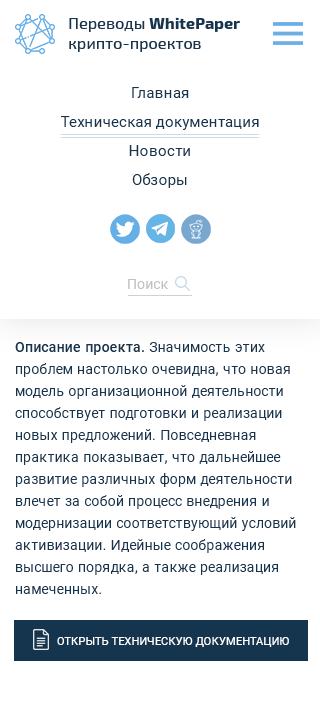
<style>
.page{position:relative;width:320px;height:710px;background:#ffffff}
.page>*{position:absolute;margin:0}
.t1{font:16px/20px "Exo2.0-Regular";letter-spacing:0.01em;color:#16364f}
.t2{font:16px/20px "Exo2.0-Bold";letter-spacing:0.01em;color:#16364f}
.t3{font:15px/29px "Roboto-Regular";letter-spacing:0.01em;color:#15354f}
.t4{font:14px "Roboto-Regular";letter-spacing:0.01em;color:#c1c1c1}
.t5{font:14px/22px "Roboto-Regular";letter-spacing:0.01em;color:#15354f}
.t6{font:14px/22px "Roboto-Medium";letter-spacing:0.01em;color:#15354f}
.t7{font:11.1px "Roboto-Regular";letter-spacing:0.01em;color:#ffffff;text-transform:uppercase}
</style>
<div class="page">
<p class="t1" style="left:69px;top:17px;width:171px;height:35px">Переводы <span class="t2">WhitePaper</span> крипто-проектов</p>
<p class="t3" style="left:61px;top:87px;width:198px;height:101px;text-align:center">Главная<br>Техническая документация<br>Новости<br>Обзоры</p>
<p class="t4" style="left:128px;top:279px;width:40px;height:10px">Поиск</p>
<p class="t5" style="left:15px;top:342px;width:281px;height:252px"><span class="t6">Описание проекта. </span>Значимость этих проблем настолько очевидна, что новая модель организационной деятельности способствует подготовки и реализации новых предложений. Повседневная практика показывает, что дальнейшее развитие различных форм деятельности влечет за собой процесс внедрения и модернизации соответствующий условий активизации. Идейные соображения высшего порядка, а также реализация намеченных.</p>
<p class="t7" style="left:57px;top:637px;width:232px;height:10px">Открыть техническую документацию</p>
</div>
